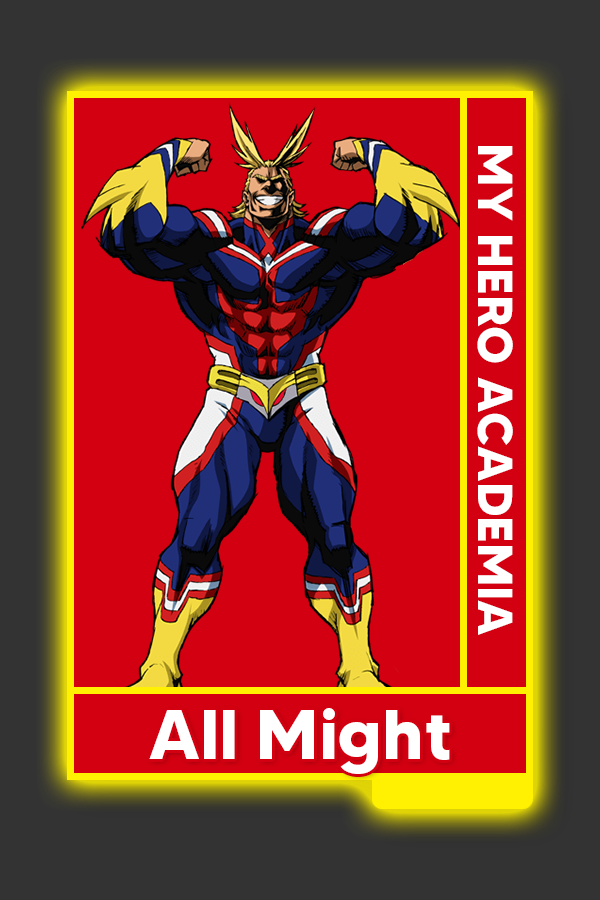
<style>
.page{position:relative;width:600px;height:900px;background:#d20010}
.page>*{position:absolute;margin:0}
.t1{font:48.8px "MADETOMMY-Bold";color:#ffffff}
.t2{font:70.1px "MADETOMMY-Bold";color:#ffffff}
</style>
<div class="page">
<p class="t1" style="left:477px;top:146px;width:36px;height:489px;rotate:90deg">MY HERO ACADEMIA</p>
<p class="t2" style="left:149px;top:708px;width:301px;height:66px">All Might</p>
</div>
